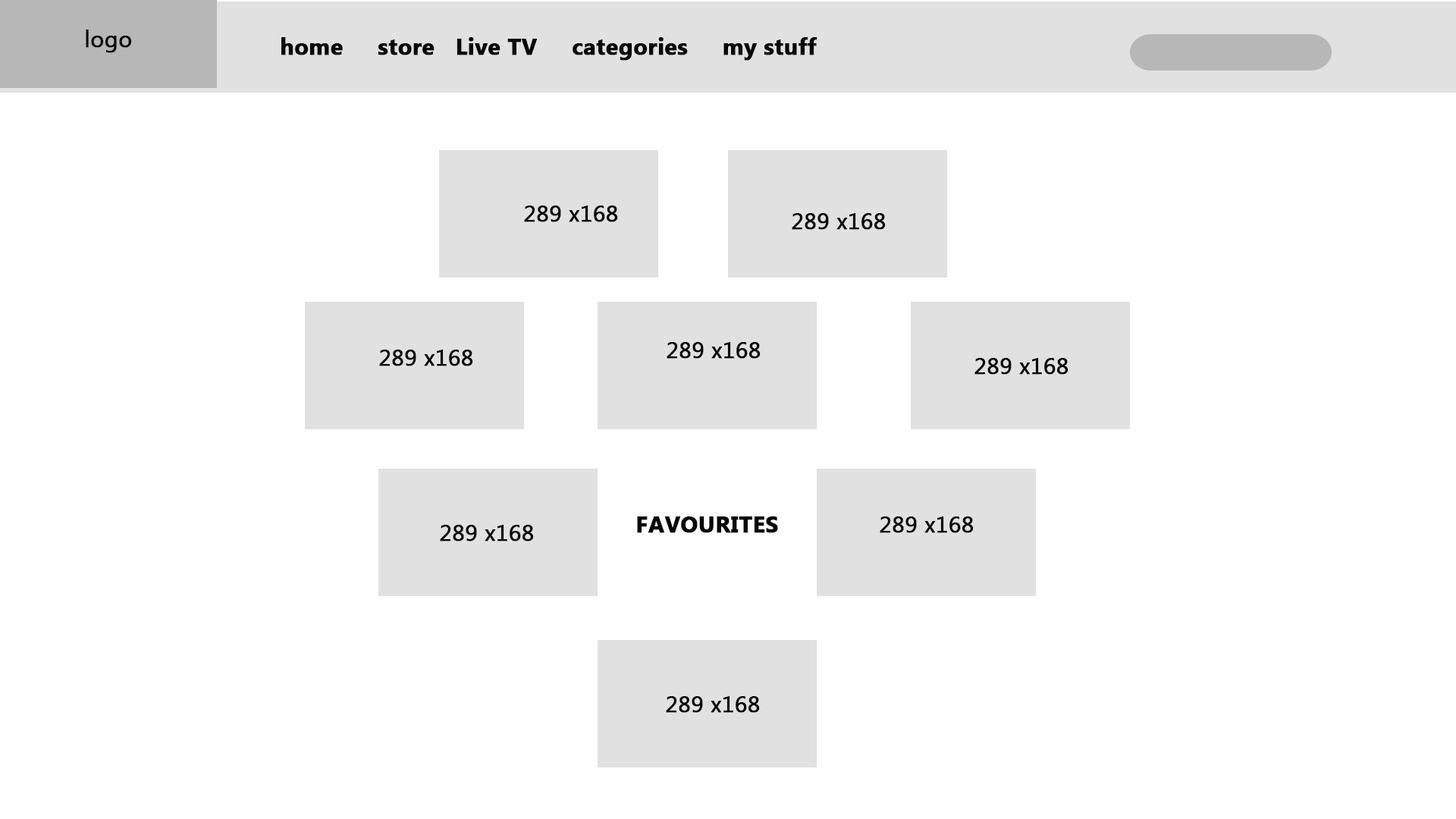
<style>
.page{position:relative;width:1456px;height:819px;background:#ffffff}
.page>*{position:absolute;margin:0}
.t1{font:22.7px "MyanmarText";color:#080807;font-weight:bold}
.t2{font:22.7px "MyanmarText-Bold";color:#080807;font-weight:bold}
</style>
<div class="page">
<p class="t1" style="left:86px;top:30px;width:45px;height:23px">logo</p>
<p class="t2" style="left:281px;top:37px;width:536px;height:24px">home     store   Live TV     categories     my stuff</p>
<p class="t1" style="left:524px;top:206px;width:94px;height:16px">289 x168</p>
<p class="t1" style="left:792px;top:213px;width:94px;height:17px">289 x168</p>
<p class="t1" style="left:379px;top:350px;width:94px;height:16px">289 x168</p>
<p class="t1" style="left:667px;top:342px;width:94px;height:17px">289 x168</p>
<p class="t1" style="left:974px;top:358px;width:94px;height:17px">289 x168</p>
<p class="t2" style="left:637px;top:516px;width:141px;height:17px">FAVOURITES</p>
<p class="t1" style="left:880px;top:516px;width:94px;height:17px">289 x168</p>
<p class="t1" style="left:440px;top:525px;width:94px;height:16px">289 x168</p>
<p class="t1" style="left:666px;top:696px;width:94px;height:17px">289 x168</p>
</div>
